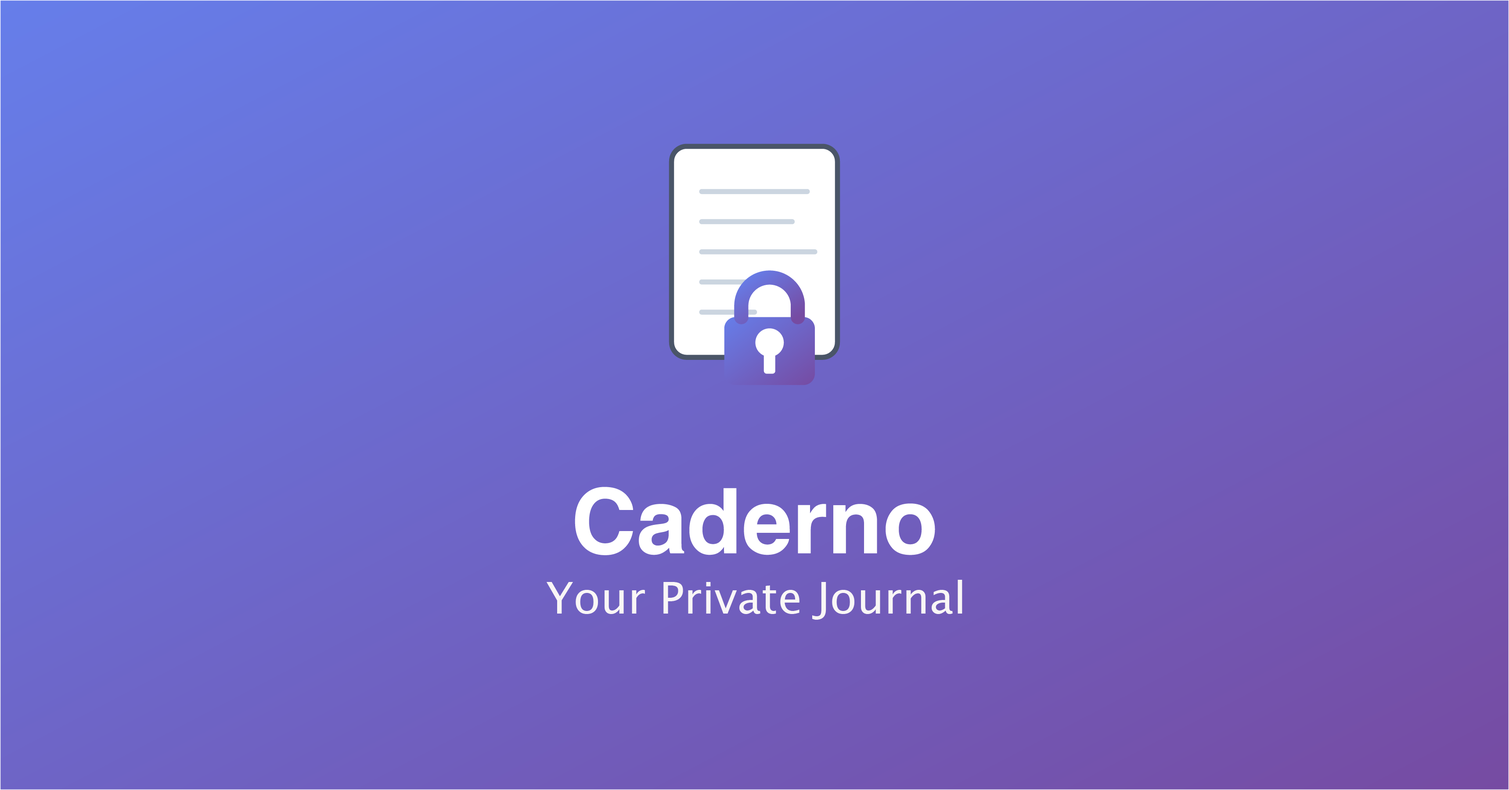
<style>
.page{position:relative;width:1509px;height:790px}
.page>*{position:absolute;margin:0}
.t1{font:43.9px "LucidaGrande";color:#f9f6f6}
</style>
<div class="page">
<p class="t1" style="left:547px;top:580px;width:415px;height:40px">Your Private Journal</p>
</div>
